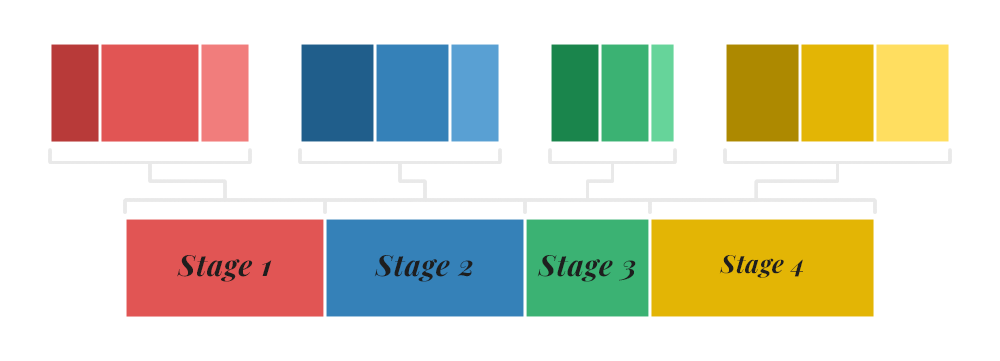
<style>
.page{position:relative;width:1000px;height:361px;background:#ffffff}
.page>*{position:absolute;margin:0}
.t1{font:29.2px "PlayfairDisplay-BoldItalic";letter-spacing:0.025em;color:#1e1e1e}
.t2{font:25px "PlayfairDisplay-BoldItalic";letter-spacing:0.025em;color:#1e1e1e}
</style>
<div class="page">
<p class="t1" style="left:177px;top:255px;width:95px;height:27px">Stage 1</p>
<p class="t1" style="left:374px;top:255px;width:99px;height:27px">Stage 2</p>
<p class="t1" style="left:537px;top:255px;width:99px;height:27px">Stage 3</p>
<p class="t2" style="left:719px;top:255px;width:84px;height:23px">Stage 4</p>
</div>
